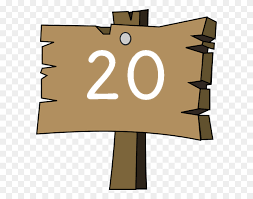
<style>
.page{position:relative;width:253px;height:199px;background:#b18f5f}
.page>*{position:absolute;margin:0}
.t1{font:64px "DeliusUnicase-Regular";color:#ffffff}
</style>
<div class="page">
<p class="t1" style="left:86px;top:50px;width:79px;height:50px">20</p>
</div>
